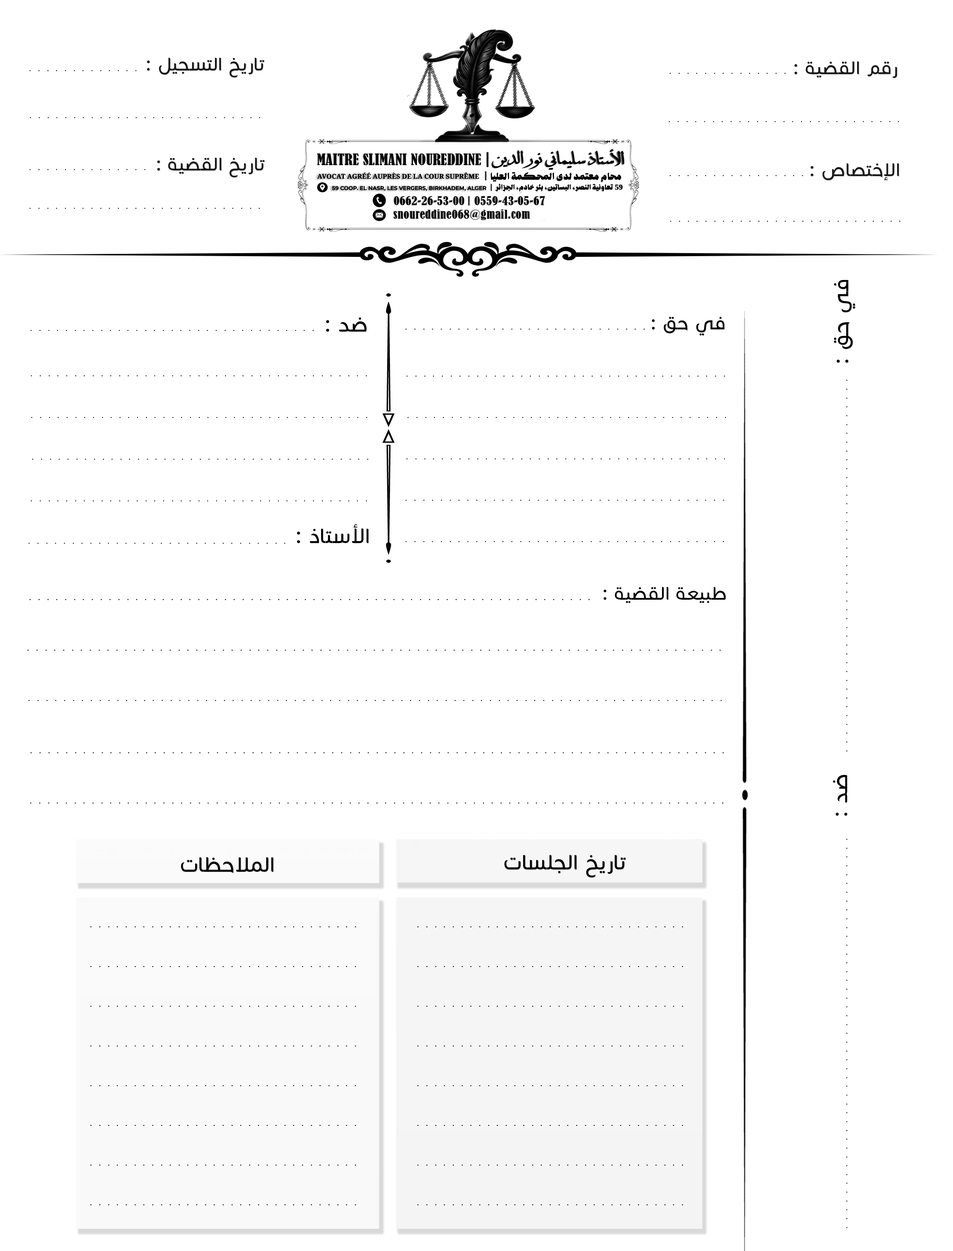
<style>
.page{position:relative;width:953px;height:1251px;background:#ffffff}
.page>*{position:absolute;margin:0}
.t1{font:21.2px "CoconNextArabic-Light";letter-spacing:0.02em;color:#181818}
.t2{font:15.5px "djadliOTFmaghribidjadid";letter-spacing:0.36em;color:#020000}
.t3{font:24.2px "CoconNextArabic-Light";letter-spacing:0.02em;color:#000000}
.t4{font:21.2px "CoconNextArabic-Light";letter-spacing:0.02em;color:#000000}
.t5{font:24.2px "CoconNextArabic-Light";letter-spacing:0.02em;color:#020000}
.t6{font:21.2px "CoconNextArabic-Light";letter-spacing:0.02em;color:#020000}
</style>
<div class="page">
<p class="t1" style="left:147px;top:58px;width:117px;height:19px">: ﻞﻴﺠﺴﺘﻟﺍ ﺦﻳﺭﺎﺗ</p>
<p class="t1" style="left:795px;top:61px;width:103px;height:17px">: ﺔﻴﻀﻘﻟﺍ ﻢﻗﺭ</p>
<p class="t2" style="left:29px;top:70px;width:108px;height:1px">.............</p>
<p class="t2" style="left:670px;top:73px;width:116px;height:1px">..............</p>
<p class="t2" style="left:30px;top:117px;width:230px;height:1px">...........................</p>
<p class="t2" style="left:669px;top:121px;width:231px;height:1px">...........................</p>
<p class="t1" style="left:157px;top:157px;width:108px;height:20px">: ﺔﻴﻀﻘﻟﺍ ﺦﻳﺭﺎﺗ</p>
<p class="t2" style="left:29px;top:169px;width:117px;height:1px">..............</p>
<p class="t1" style="left:811px;top:163px;width:89px;height:17px">: ﺹﺎﺼﺘﺧﻹﺍ</p>
<p class="t2" style="left:670px;top:175px;width:134px;height:1px">................</p>
<p class="t2" style="left:29px;top:208px;width:231px;height:1px">...........................</p>
<p class="t2" style="left:670px;top:221px;width:231px;height:1px">...........................</p>
<p class="t3" style="left:834px;top:280px;width:22px;height:83px;rotate:-90deg">: ﻖﺣ ﻲﻓ</p>
<p class="t3" style="left:326px;top:317px;width:41px;height:15px">: ﺪﺿ</p>
<p class="t4" style="left:652px;top:317px;width:73px;height:18px">: ﻖﺣ ﻲﻓ</p>
<p class="t2" style="left:30px;top:330px;width:284px;height:1px">.................................</p>
<p class="t2" style="left:406px;top:329px;width:239px;height:1px">............................</p>
<p class="t2" style="left:31px;top:375px;width:336px;height:1px">.......................................</p>
<p class="t2" style="left:407px;top:376px;width:319px;height:1px">.....................................</p>
<p class="t2" style="left:847px;top:379px;width:1px;height:372px;rotate:-90deg">...........................................</p>
<p class="t2" style="left:31px;top:417px;width:337px;height:1px">.......................................</p>
<p class="t2" style="left:408px;top:417px;width:319px;height:1px">.....................................</p>
<p class="t2" style="left:32px;top:459px;width:337px;height:1px">.......................................</p>
<p class="t2" style="left:407px;top:458px;width:319px;height:1px">.....................................</p>
<p class="t2" style="left:31px;top:500px;width:336px;height:1px">.......................................</p>
<p class="t2" style="left:406px;top:500px;width:319px;height:1px">.....................................</p>
<p class="t5" style="left:297px;top:524px;width:72px;height:19px">: ﺫﺎﺘﺳﻷﺍ</p>
<p class="t2" style="left:28px;top:543px;width:258px;height:1px">..............................</p>
<p class="t2" style="left:406px;top:541px;width:319px;height:1px">.....................................</p>
<p class="t6" style="left:604px;top:587px;width:122px;height:16px">: ﺔﻴﻀﻘﻟﺍ ﺔﻌﻴﺒﻃ</p>
<p class="t3" style="left:833px;top:775px;width:15px;height:41px;rotate:-90deg">: ﺪﺿ</p>
<p class="t2" style="left:847px;top:838px;width:1px;height:390px;rotate:-90deg">.............................................</p>
<p class="t5" style="left:181px;top:857px;width:93px;height:16px">ﺕﺎﻈﺣﻼﻤﻟﺍ</p>
<p class="t5" style="left:505px;top:855px;width:121px;height:22px">ﺕﺎﺴﻠﺠﻟﺍ ﺦﻳﺭﺎﺗ</p>
</div>
